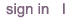
<style>
.page{position:relative;width:74px;height:19px;background:#ffffff}
.page>*{position:absolute;margin:0}
.t1{font:15px "ArialMT";color:#7b637d}
</style>
<div class="page">
<p class="t1" style="left:6px;top:3px;width:59px;height:15px">sign in   I</p>
</div>
